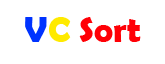
<style>
.page{position:relative;width:165px;height:64px;background:#ffffff}
.page>*{position:absolute;margin:0}
.t1{font:36px "BerlinSansFBDemi-Bold";color:#ff0006}
.t2{font:36px "BerlinSansFBDemi-Bold";color:#0033ff}
.t3{font:36px "BerlinSansFBDemi-Bold";color:#ffea00}
</style>
<div class="page">
<p class="t1" style="left:25px;top:17px;width:116px;height:25px"><span class="t2">V</span><span class="t3">C</span> Sort</p>
</div>
